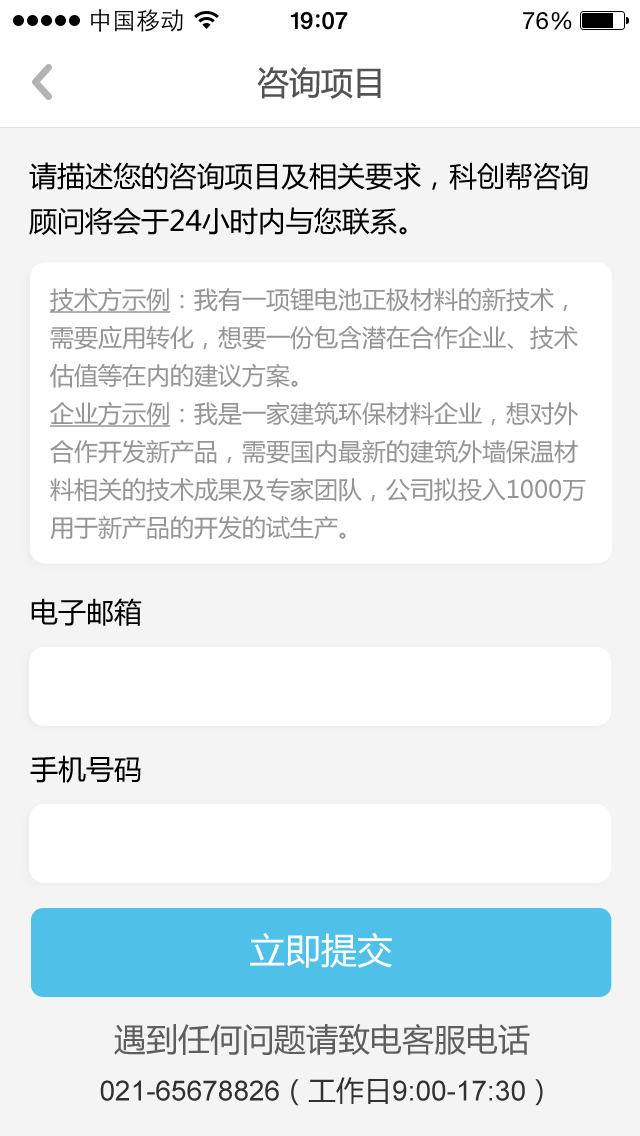
<style>
.page{position:relative;width:640px;height:1136px;background:#ffffff}
.page>*{position:absolute;margin:0}
.t1{font:32px "MicrosoftYaHei";color:#545353}
.t2{font:28px/45px "MicrosoftYaHei";color:#000000}
.t3{font:24px/38px "MicrosoftYaHei";color:#959595}
.t4{font:24px/38px "MicrosoftYaHei";color:#959595;text-decoration:underline}
.t5{font:28px "MicrosoftYaHei";color:#000000}
.t6{font:36px "MicrosoftYaHei";color:#ffffff}
.t7{font:32px "MicrosoftYaHei";color:#5e5e5e}
.t8{font:28px "ArialMT";color:#313131}
.t9{font:40px "ArialMT";color:#313131}
.t10{font:28px "MicrosoftYaHei";color:#313131}
</style>
<div class="page">
<p class="t1" style="left:257px;top:67px;width:124px;height:32px">咨询项目</p>
<p class="t2" style="left:29px;top:162px;width:559px;height:73px">请描述您的咨询项目及相关要求，科创帮咨询<br>顾问将会于24小时内与您联系。</p>
<p class="t3" style="left:50px;top:287px;width:536px;height:253px"><span class="t4">技术方示例</span>：我有一项锂电池正极材料的新技术，<br>需要应用转化，想要一份包含潜在合作企业、技术<br>估值等在内的建议方案。<br><span class="t4">企业方示例</span>：我是一家建筑环保材料企业，想对外<br>合作开发新产品，需要国内最新的建筑外墙保温材<br>料相关的技术成果及专家团队，公司拟投入1000万<br>用于新产品的开发的试生产。</p>
<p class="t5" style="left:31px;top:598px;width:111px;height:28px">电子邮箱</p>
<p class="t5" style="left:30px;top:755px;width:111px;height:28px">手机号码</p>
<p class="t6" style="left:250px;top:932px;width:142px;height:36px">立即提交</p>
<p class="t7" style="left:114px;top:1023px;width:416px;height:32px">遇到任何问题请致电客服电话</p>
<p class="t8" style="left:100px;top:1077px;width:443px;height:29px"><span class="t9"> </span>021-65678826<span class="t10">（工作日</span>9:00-17:30<span class="t10">）</span></p>
</div>
